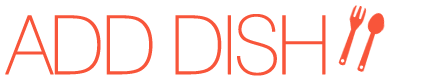
<style>
.page{position:relative;width:426px;height:78px;background:#ffffff}
.page>*{position:absolute;margin:0}
.t1{font:81.4px "Lane-Narrow";letter-spacing:-0.08em;color:#f8553a;font-weight:bold}
</style>
<div class="page">
<p class="t1" style="left:5px;top:14px;width:321px;height:62px">ADD DISH</p>
</div>
